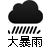
<style>
.page{position:relative;width:50px;height:48px;background:#ffffff}
.page>*{position:absolute;margin:0}
.t1{font:12px "OPPOSans-R";color:#000000}
</style>
<div class="page">
<p class="t1" style="left:8px;top:36px;width:34px;height:11px">大暴雨</p>
</div>
